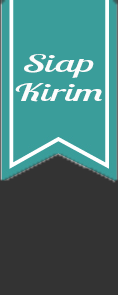
<style>
.page{position:relative;width:118px;height:295px;background:#333333}
.page>*{position:absolute;margin:0}
.t1{font:23.9px/29.1px "LobsterTwo-Italic";color:#fcfcfc;scale:1.8 1}
</style>
<div class="page">
<p class="t1" style="left:15px;top:54px;width:87px;height:48px;text-align:center">Siap<br>Kirim</p>
</div>
